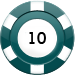
<style>
.page{position:relative;width:75px;height:75px;background:#ffffff}
.page>*{position:absolute;margin:0}
.t1{font:18px "Rockwell";color:#000000}
</style>
<div class="page">
<p class="t1" style="left:29px;top:32px;width:17px;height:12px">10</p>
</div>
